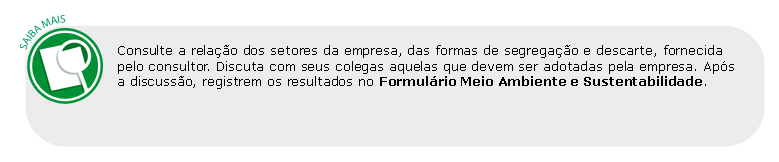
<style>
.page{position:relative;width:779px;height:162px;background:#ececec}
.page>*{position:absolute;margin:0}
.t1{font:13px "Verdana";letter-spacing:-0.01em;color:#000000}
.t2{font:13px "Verdana-Bold";letter-spacing:-0.01em;color:#000000}
</style>
<div class="page">
<p class="t1" style="left:118px;top:45px;width:616px;height:44px">Consulte a relação dos setores da empresa, das formas de segregação e descarte, fornecida <br>pelo consultor. Discuta com seus colegas aquelas que devem ser adotadas pela empresa. Após <br>a discussão, registrem os resultados no <span class="t2">Formulário Meio Ambiente e Sustentabilidade</span>.</p>
</div>
